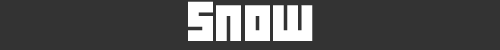
<style>
.page{position:relative;width:500px;height:50px;background:#333333}
.page>*{position:absolute;margin:0}
.t1{font:50px "04b19";color:#ffffff}
</style>
<div class="page">
<p class="t1" style="left:188px;top:1px;width:125px;height:40px">Snow</p>
</div>
